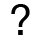
<style>
.page{position:relative;width:40px;height:40px;background:#ffffff}
.page>*{position:absolute;margin:0}
.t1{font:42px "HelveticaNeue";color:#000000}
</style>
<div class="page">
<p class="t1" style="left:11px;top:4px;width:19px;height:31px">?</p>
</div>
